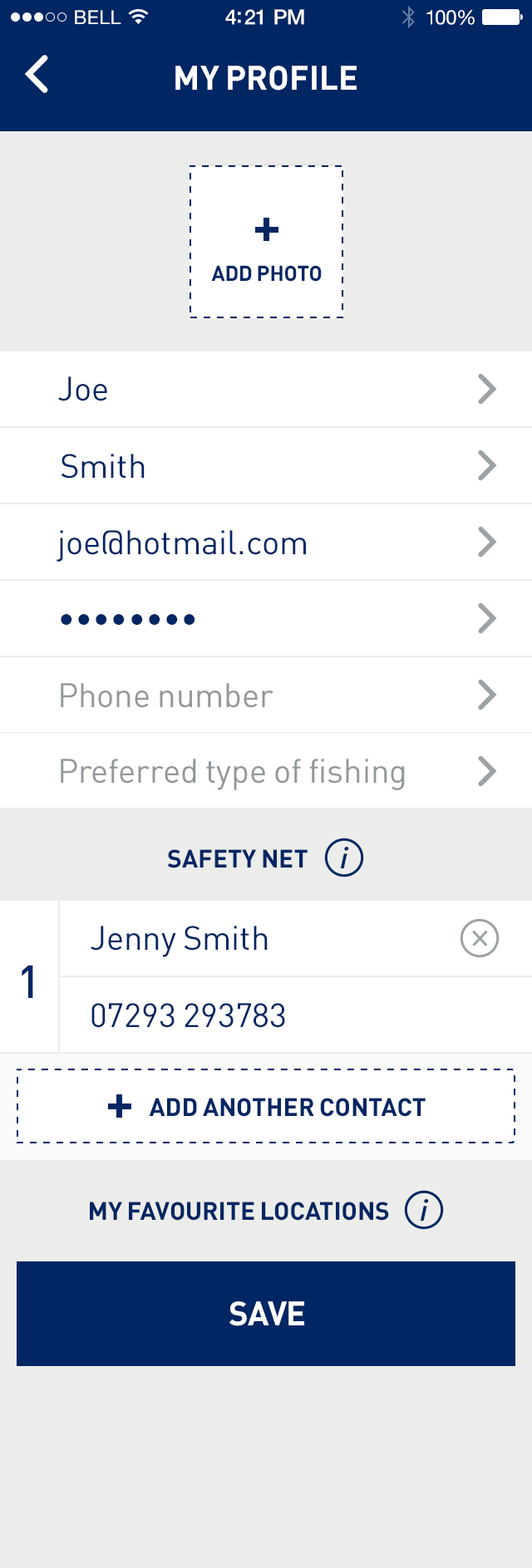
<style>
.page{position:relative;width:532px;height:1568px;background:#ffffff}
.page>*{position:absolute;margin:0}
.t1{font:19.1px "HelveticaNeue";letter-spacing:0.02em;color:#ffffff}
.t2{font:20.8px "HelveticaNeue-Medium";letter-spacing:-0.02em;color:#ffffff}
.t3{font:19.9px "HelveticaNeue";letter-spacing:-0.02em;color:#ffffff}
.t4{font:33.2px "DIN-Bold";color:#ffffff;text-transform:uppercase}
.t5{font:21px "DIN-Bold";color:#002663;text-transform:uppercase}
.t6{font:33.2px "DIN-Regular";color:#002663}
.t7{font:33.2px "DIN-Regular";color:#91979a}
.t8{font:24.9px "DIN-Bold";color:#002663;text-transform:uppercase}
.t9{font:31.3px "Bliss2-MediumItalic";color:#002663}
.t10{font:45.7px "DIN-Medium";color:#002663;text-transform:uppercase}
.t11{font:33.2px "DIN-Bold";letter-spacing:-0.015em;color:#ffffff;text-transform:uppercase}
</style>
<div class="page">
<p class="t1" style="left:75px;top:10px;width:46px;height:14px">BELL</p>
<p class="t2" style="left:225px;top:9px;width:79px;height:16px">4:21 PM</p>
<p class="t3" style="left:426px;top:10px;width:48px;height:15px">100%</p>
<p class="t4" style="left:175px;top:66px;width:181px;height:25px">my profile</p>
<p class="t5" style="left:211px;top:265px;width:111px;height:17px">Add photo</p>
<p class="t6" style="left:58px;top:376px;width:49px;height:25px">Joe</p>
<p class="t6" style="left:61px;top:454px;width:84px;height:25px">Smith</p>
<p class="t6" style="left:57px;top:530px;width:249px;height:32px">joe@hotmail.com</p>
<p class="t6" style="left:61px;top:614px;width:134px;height:11px">••••••••</p>
<p class="t7" style="left:61px;top:683px;width:212px;height:25px">Phone number</p>
<p class="t7" style="left:61px;top:759px;width:344px;height:31px">Preferred type of fishing</p>
<p class="t8" style="left:167px;top:849px;width:140px;height:19px">safety net</p>
<p class="t9" style="left:340px;top:847px;width:9px;height:21px">i</p>
<p class="t6" style="left:91px;top:926px;width:177px;height:31px">Jenny Smith</p>
<p class="t10" style="left:22px;top:965px;width:11px;height:33px">1</p>
<p class="t6" style="left:91px;top:1003px;width:194px;height:25px">07293 293783</p>
<p class="t8" style="left:149px;top:1098px;width:276px;height:19px">Add another contact</p>
<p class="t8" style="left:90px;top:1202px;width:299px;height:19px">My favourite locations</p>
<p class="t9" style="left:420px;top:1199px;width:9px;height:22px">i</p>
<p class="t11" style="left:229px;top:1301px;width:75px;height:25px">save</p>
</div>
